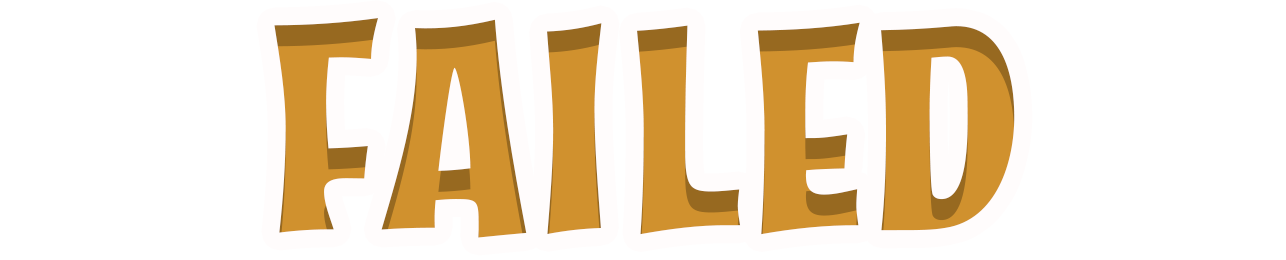
<style>
.page{position:relative;width:1286px;height:260px;background:#ffffff}
.page>*{position:absolute;margin:0}
.t1{font:281.2px "Catseye-Bold";color:#d0912e}
</style>
<div class="page">
<p class="t1" style="left:274px;top:18px;width:741px;height:220px">FAILED</p>
</div>
